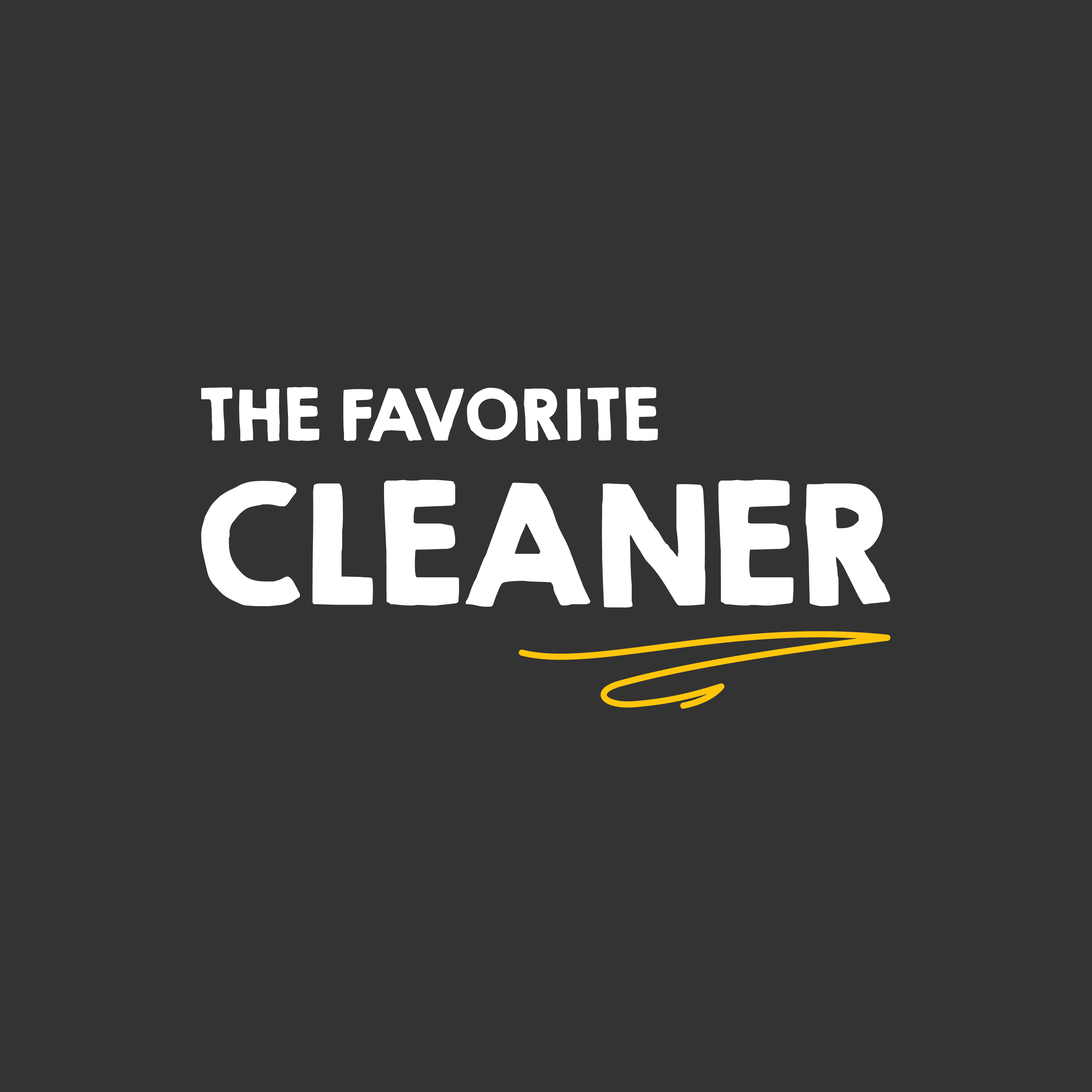
<style>
.page{position:relative;width:1092px;height:1092px;background:#333333}
.page>*{position:absolute;margin:0}
.t1{font:64.3px "KGHAPPYSolid";letter-spacing:-0.05em;color:#ffffff;text-transform:uppercase}
.t2{font:150.3px "KGHAPPYSolid";letter-spacing:-0.075em;color:#ffffff;text-transform:uppercase}
</style>
<div class="page">
<p class="t1" style="left:201px;top:387px;width:457px;height:55px">The Favorite</p>
<p class="t2" style="left:201px;top:480px;width:689px;height:128px">cLEANER</p>
</div>
